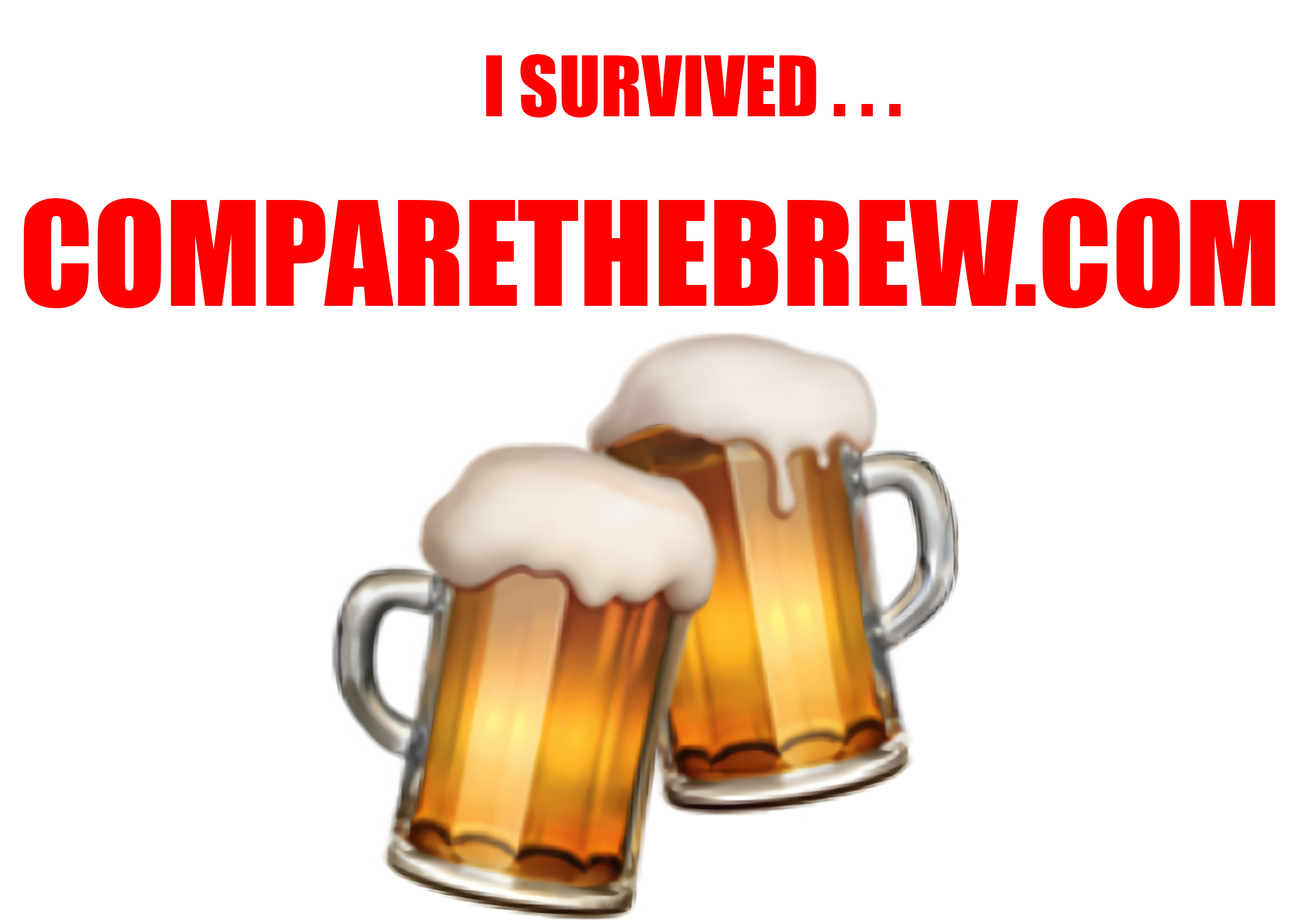
<style>
.page{position:relative;width:1292px;height:923px;background:#ffffff}
.page>*{position:absolute;margin:0}
.t1{font:76.9px "Impact";color:#ff0000}
.t2{font:133.3px "Impact";color:#ff0000}
</style>
<div class="page">
<p class="t1" style="left:486px;top:54px;width:415px;height:64px">I SURVIVED . . .</p>
<p class="t2" style="left:23px;top:198px;width:1252px;height:110px">COMPARETHEBREW.COM</p>
</div>
